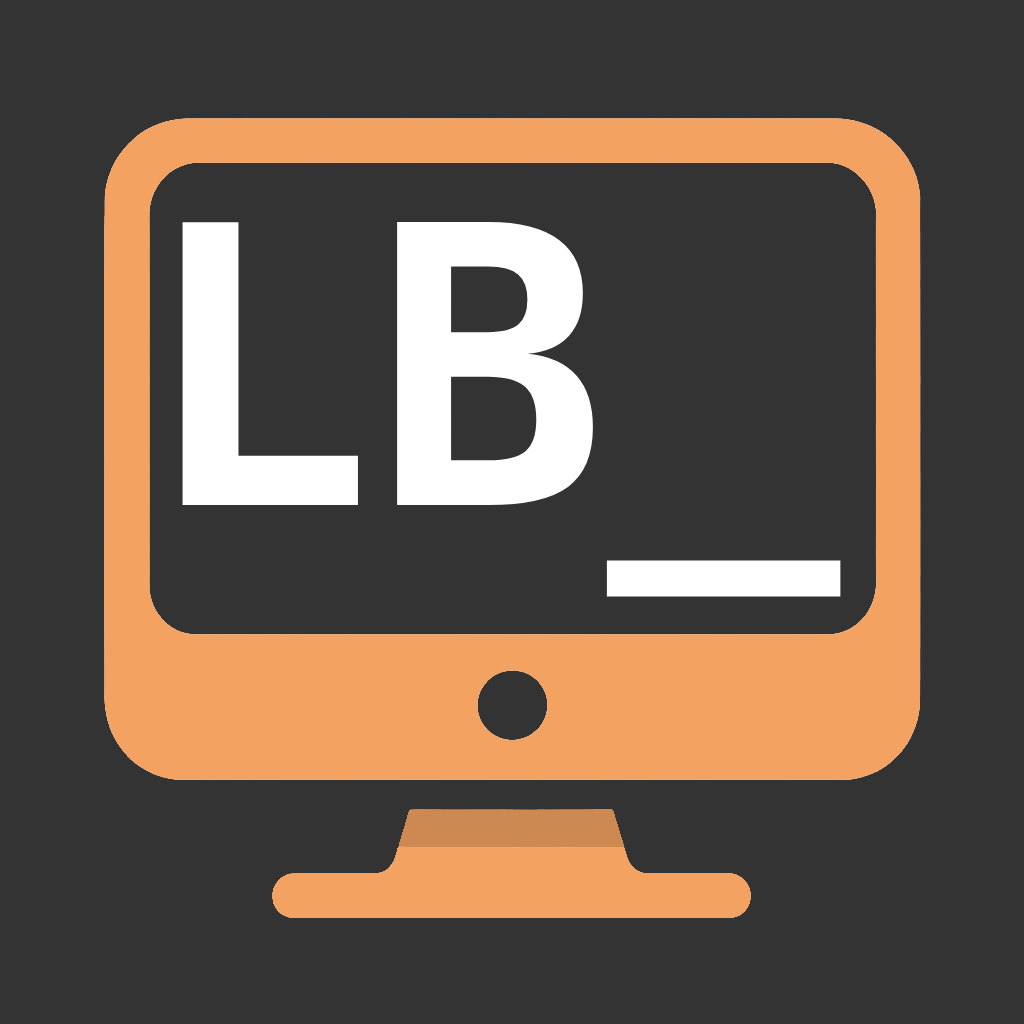
<style>
.page{position:relative;width:1024px;height:1024px;background:#333333}
.page>*{position:absolute;margin:0}
.t1{font:387.8px "DejaVuSansMono-Bold";color:#ffffff}
</style>
<div class="page">
<p class="t1" style="left:182px;top:221px;width:659px;height:376px">LB_</p>
</div>
